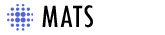
<style>
.page{position:relative;width:165px;height:35px;background:#ffffff}
.page>*{position:absolute;margin:0}
.t1{font:34px "TwCenMT-Condensed";color:#000000}
</style>
<div class="page">
<p class="t1" style="left:42px;top:5px;width:51px;height:23px">MATS</p>
</div>
